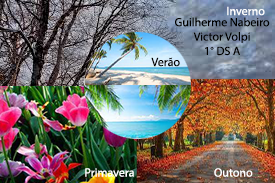
<style>
.page{position:relative;width:275px;height:183px}
.page>*{position:absolute;margin:0}
.t1{font:12px "MyriadPro-Regular";color:#ffffff}
.t2{font:12px "MyriadPro-Regular";color:#000000}
</style>
<div class="page">
<p class="t1" style="left:227px;top:6px;width:38px;height:10px">Inverno</p>
<p class="t2" style="left:175px;top:17px;width:95px;height:39px;text-align:center">Guilherme Nabeiro<br>Victor Volpi<br>1° DS A</p>
<p class="t2" style="left:151px;top:57px;width:29px;height:10px">Verão</p>
<p class="t1" style="left:85px;top:168px;width:49px;height:9px">Primavera</p>
<p class="t1" style="left:214px;top:168px;width:39px;height:9px">Outono</p>
</div>
